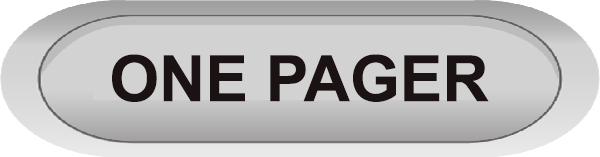
<style>
.page{position:relative;width:600px;height:157px;background:#d3d2d2}
.page>*{position:absolute;margin:0}
.t1{font:64px "Arial-BoldMT";color:#1b1313}
</style>
<div class="page">
<p class="t1" style="left:112px;top:54px;width:377px;height:48px">ONE PAGER</p>
</div>
